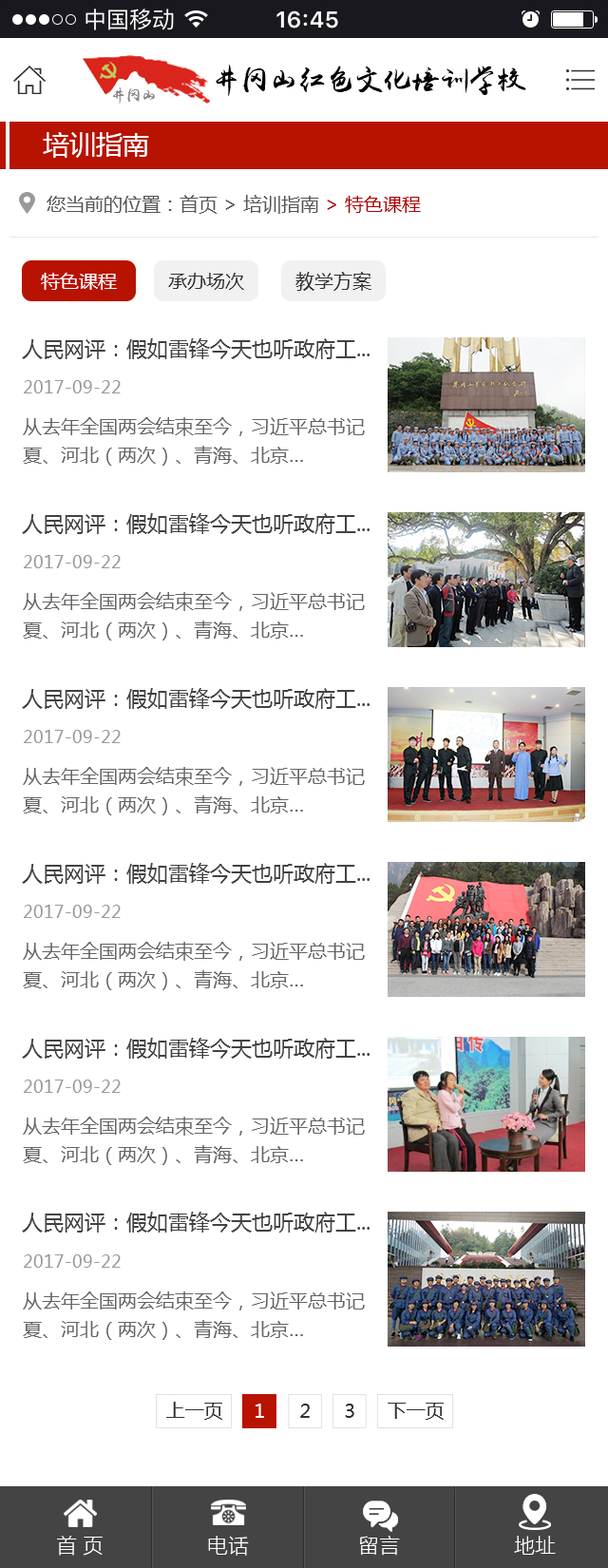
<style>
.page{position:relative;width:608px;height:1568px;background:#ffffff}
.page>*{position:absolute;margin:0}
.t1{font:26.6px "MicrosoftYaHei";color:#ffffff}
.t2{font:19px "MicrosoftYaHei";color:#555555}
.t3{font:19px "MicrosoftYaHei";color:#b00104}
.t4{font:19px "MicrosoftYaHei";color:#323232}
.t5{font:19px "MicrosoftYaHei";color:#ffffff}
.t6{font:20.9px "MicrosoftYaHei";color:#424242}
.t7{font:17.1px "MicrosoftYaHei";color:#9b9b9b}
.t8{font:19px/28.5px "MicrosoftYaHei";color:#646464}
.t9{font:20.9px "FZLTKHK--GBK1-0";color:#ffffff}
</style>
<div class="page">
<p class="t1" style="left:43px;top:132px;width:106px;height:26px">培训指南</p>
<p class="t2" style="left:47px;top:195px;width:374px;height:19px">您当前的位置：首页 &gt; 培训指南<span class="t3"> &gt; 特色课程</span></p>
<p class="t4" style="left:41px;top:272px;width:331px;height:19px"><span class="t5">特色课程  </span>       承办场次         教学方案</p>
<p class="t6" style="left:22px;top:338px;width:348px;height:21px">人民网评：假如雷锋今天也听政府工...</p>
<p class="t7" style="left:24px;top:380px;width:97px;height:13px">2017-09-22</p>
<p class="t8" style="left:23px;top:417px;width:342px;height:49px">从去年全国两会结束至今，习近平总书记<br>夏、河北（两次）、青海、北京…</p>
<p class="t6" style="left:22px;top:513px;width:348px;height:21px">人民网评：假如雷锋今天也听政府工...</p>
<p class="t7" style="left:24px;top:555px;width:97px;height:13px">2017-09-22</p>
<p class="t8" style="left:23px;top:592px;width:342px;height:49px">从去年全国两会结束至今，习近平总书记<br>夏、河北（两次）、青海、北京…</p>
<p class="t6" style="left:22px;top:688px;width:348px;height:21px">人民网评：假如雷锋今天也听政府工...</p>
<p class="t7" style="left:24px;top:730px;width:97px;height:13px">2017-09-22</p>
<p class="t8" style="left:23px;top:767px;width:342px;height:48px">从去年全国两会结束至今，习近平总书记<br>夏、河北（两次）、青海、北京…</p>
<p class="t6" style="left:22px;top:863px;width:348px;height:21px">人民网评：假如雷锋今天也听政府工...</p>
<p class="t7" style="left:24px;top:905px;width:97px;height:13px">2017-09-22</p>
<p class="t8" style="left:23px;top:942px;width:342px;height:48px">从去年全国两会结束至今，习近平总书记<br>夏、河北（两次）、青海、北京…</p>
<p class="t6" style="left:22px;top:1038px;width:348px;height:21px">人民网评：假如雷锋今天也听政府工...</p>
<p class="t7" style="left:24px;top:1080px;width:97px;height:13px">2017-09-22</p>
<p class="t8" style="left:23px;top:1117px;width:342px;height:48px">从去年全国两会结束至今，习近平总书记<br>夏、河北（两次）、青海、北京…</p>
<p class="t6" style="left:22px;top:1212px;width:348px;height:21px">人民网评：假如雷锋今天也听政府工...</p>
<p class="t7" style="left:24px;top:1254px;width:97px;height:14px">2017-09-22</p>
<p class="t8" style="left:23px;top:1291px;width:342px;height:49px">从去年全国两会结束至今，习近平总书记<br>夏、河北（两次）、青海、北京…</p>
<p class="t9" style="left:57px;top:1536px;width:46px;height:20px">首 页</p>
<p class="t9" style="left:208px;top:1536px;width:41px;height:20px">电话</p>
<p class="t9" style="left:359px;top:1536px;width:41px;height:20px">留言</p>
<p class="t9" style="left:514px;top:1536px;width:42px;height:19px">地址</p>
</div>
